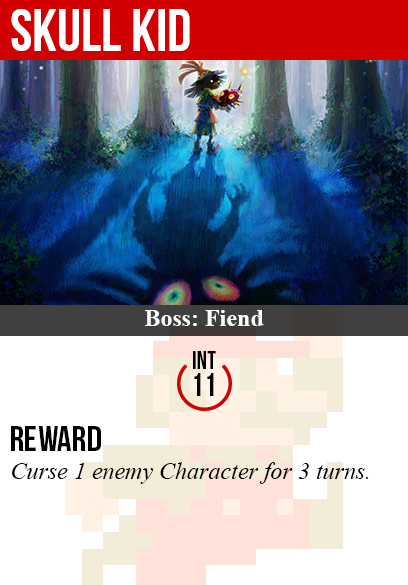
<style>
.page{position:relative;width:408px;height:585px;background:#ffffff}
.page>*{position:absolute;margin:0}
.t1{font:60px "BebasNeue";color:#ffffff}
.t2{font:24px "TimesNewRomanPS-BoldMT";color:#ffffff}
.t3{font:25px "BebasNeue";color:#000000}
.t4{font:32px "BebasNeue";color:#000000}
.t5{font:36px "BebasNeue";color:#000000}
.t6{font:24px "TimesNewRomanPS-ItalicMT";color:#000000}
</style>
<div class="page">
<p class="t1" style="left:11px;top:9px;width:179px;height:42px">skull kid</p>
<p class="t2" style="left:145px;top:310px;width:119px;height:16px">Boss: Fiend</p>
<p class="t3" style="left:193px;top:351px;width:23px;height:18px">int</p>
<p class="t4" style="left:194px;top:373px;width:20px;height:23px">11</p>
<p class="t5" style="left:11px;top:426px;width:90px;height:25px">reward</p>
<p class="t6" style="left:12px;top:462px;width:357px;height:22px">Curse 1 enemy Character for 3 turns.</p>
</div>
